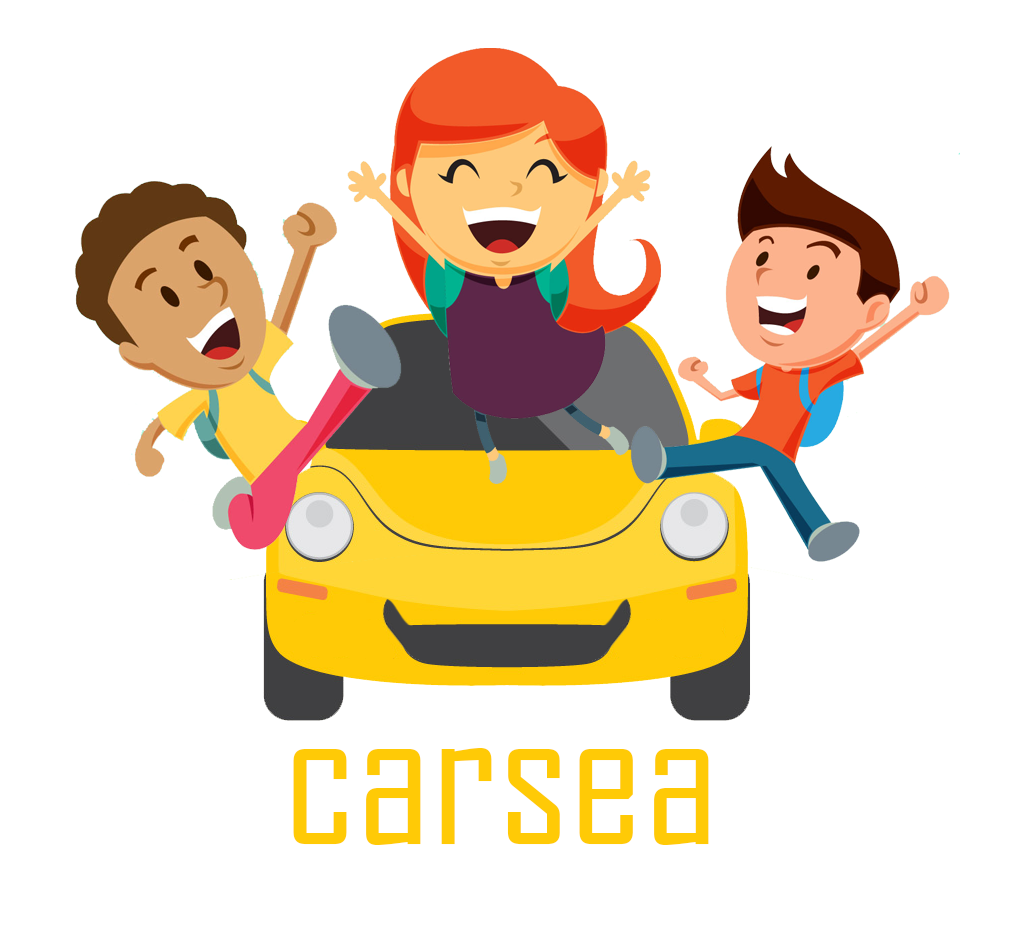
<style>
.page{position:relative;width:1033px;height:937px;background:#ffffff}
.page>*{position:absolute;margin:0}
.t1{font:200px "AgencyFB-Reg";color:#ffca06}
</style>
<div class="page">
<p class="t1" style="left:293px;top:748px;width:416px;height:97px">carsea</p>
</div>
